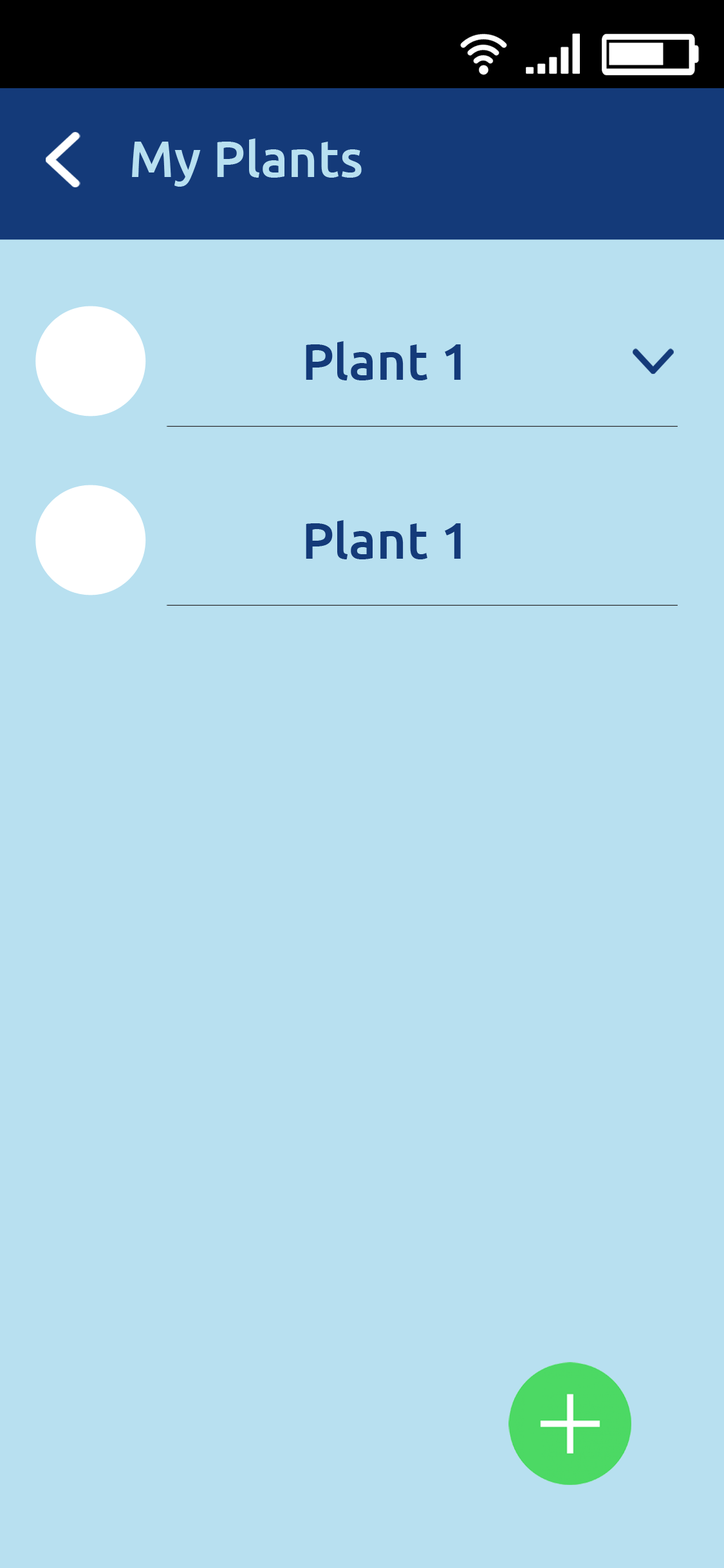
<style>
.page{position:relative;width:724px;height:1568px;background:#b8e0f0}
.page>*{position:absolute;margin:0}
.t1{font:51.5px "Ubuntu-Medium";color:#b8e0f0}
.t2{font:51.5px "Ubuntu-Medium";color:#143a79}
</style>
<div class="page">
<p class="t1" style="left:132px;top:138px;width:230px;height:49px">My Plants</p>
<p class="t2" style="left:306px;top:341px;width:155px;height:39px">Plant 1</p>
<p class="t2" style="left:306px;top:520px;width:155px;height:39px">Plant 1</p>
</div>
